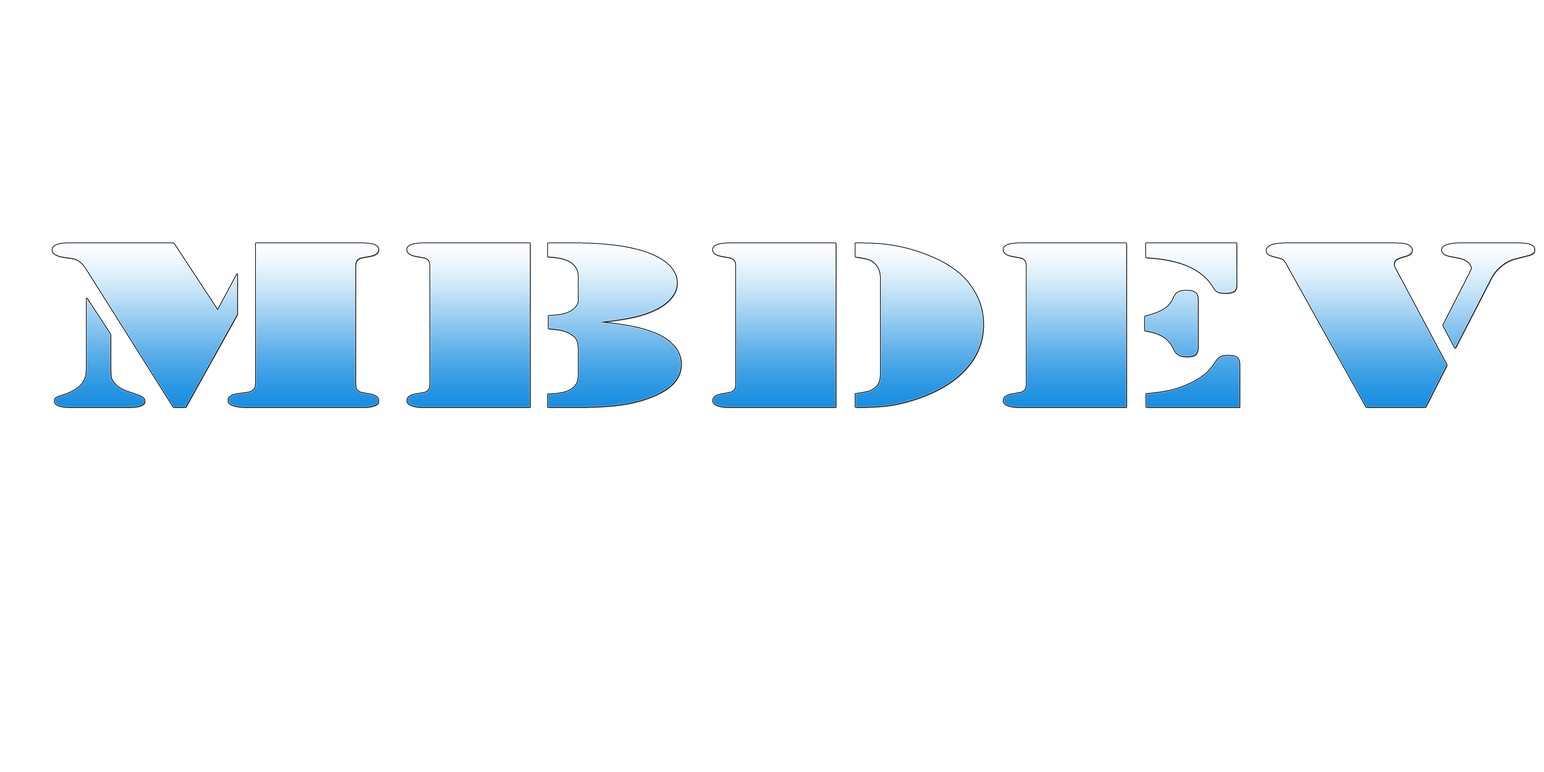
<style>
.page{position:relative;width:1544px;height:772px;background:#ffffff}
.page>*{position:absolute;margin:0}
.t1{font:245.5px "Stencil";scale:1.87 1}
</style>
<div class="page">
<p class="t1" style="left:53px;top:243px;width:1482px;height:164px">mBDev</p>
</div>
